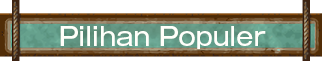
<style>
.page{position:relative;width:322px;height:61px;background:#ffffff}
.page>*{position:absolute;margin:0}
.t1{font:25px "GothicMB101Pro-Medium";color:#fffffa}
</style>
<div class="page">
<p class="t1" style="left:60px;top:26px;width:206px;height:23px">Pilihan Populer</p>
</div>
